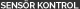
<style>
.page{position:relative;width:80px;height:9px;background:#333333}
.page>*{position:absolute;margin:0}
.t1{font:9px "Raleway-Bold";letter-spacing:-0.03em;color:#ffffff}
</style>
<div class="page">
<p class="t1" style="left:0px;top:0px;width:79px;height:9px">SENSÖR KONTROL</p>
</div>
